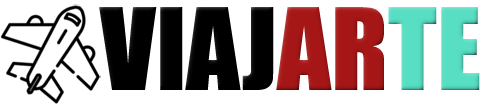
<style>
.page{position:relative;width:500px;height:104px;background:#ffffff}
.page>*{position:absolute;margin:0}
.t1{font:105.4px "Impact";color:#000000}
.t2{font:105.4px "Impact";color:#a61616}
.t3{font:105.4px "Impact";color:#57dec3}
</style>
<div class="page">
<p class="t1" style="left:99px;top:7px;width:381px;height:83px">VIAJ<span class="t2">AR</span><span class="t3">TE</span></p>
</div>
